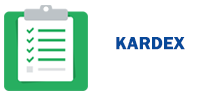
<style>
.page{position:relative;width:207px;height:102px;background:#ffffff}
.page>*{position:absolute;margin:0}
.t1{font:18px "FranklinGothic-Demi";color:#074899;font-weight:bold}
</style>
<div class="page">
<p class="t1" style="left:116px;top:37px;width:69px;height:13px">KARDEX</p>
</div>
